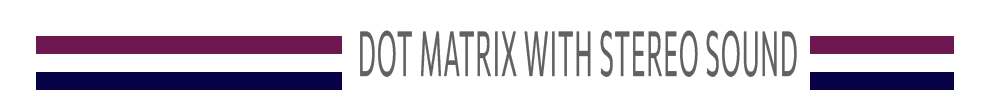
<style>
.page{position:relative;width:1000px;height:100px;background:#ffffff}
.page>*{position:absolute;margin:0}
.t1{font:62.4px "Commissioner-Regular";letter-spacing:0.05em;color:#616161;scale:0.38 1}
</style>
<div class="page">
<p class="t1" style="left:360px;top:30px;width:437px;height:47px">DOT MATRIX WITH STEREO SOUND</p>
</div>
